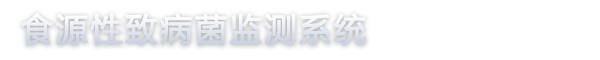
<style>
.page{position:relative;width:600px;height:60px;background:#ffffff}
.page>*{position:absolute;margin:0}
.t1{font:32px "MicrosoftYaHei";letter-spacing:0.06em;color:#e4e8f0;font-weight:bold}
</style>
<div class="page">
<p class="t1" style="left:21px;top:13px;width:346px;height:33px">食源性致病菌监测系统</p>
</div>
